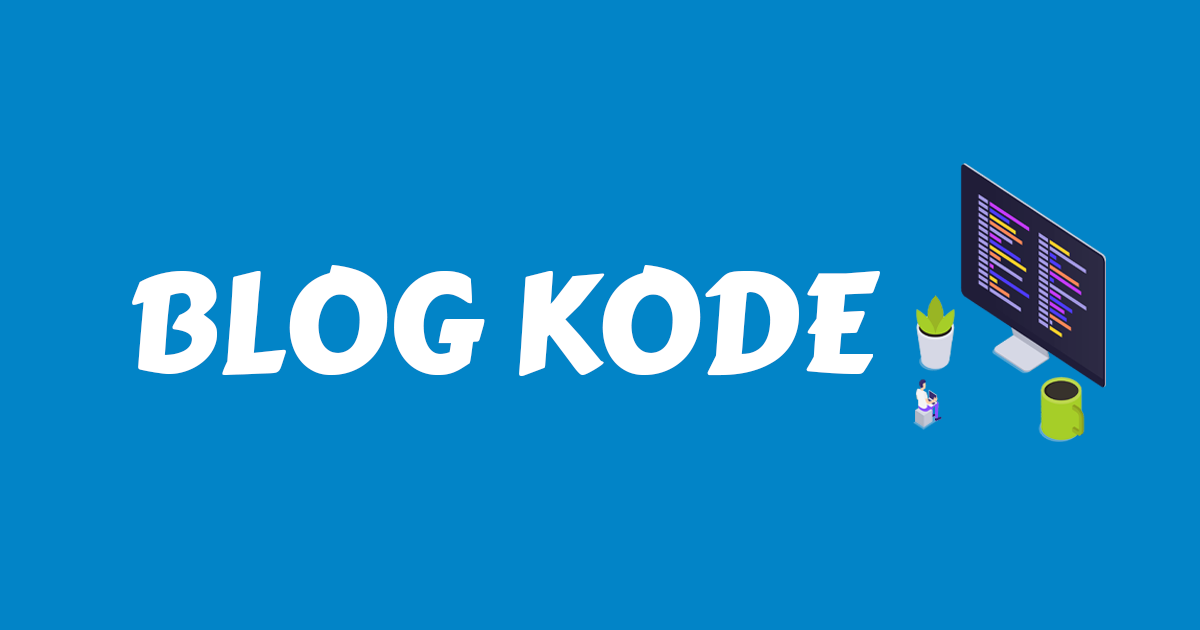
<style>
.page{position:relative;width:1200px;height:630px;background:#0284c7}
.page>*{position:absolute;margin:0}
.t1{font:138.8px "CarterOne";color:#ffffff;scale:0.96 1}
</style>
<div class="page">
<p class="t1" style="left:132px;top:265px;width:748px;height:111px">BLOG KODE</p>
</div>
